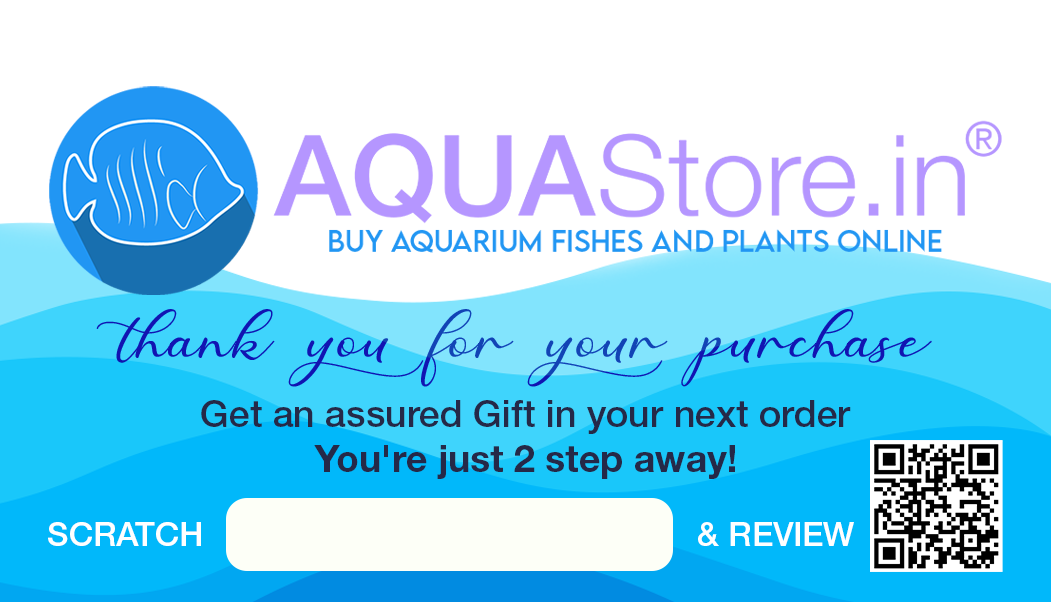
<style>
.page{position:relative;width:1051px;height:602px;background:#ffffff}
.page>*{position:absolute;margin:0}
.t1{font:62.5px "ThankYouRegular";color:#1214b2}
.t2{font:37.5px "HelveticaNeueLTStd-Md";color:#252948}
.t3{font:37.5px "HelveticaNeueLTStd-Bd";color:#252948}
.t4{font:33.3px "HelveticaNeueLTStd-Md";color:#ffffff}
</style>
<div class="page">
<p class="t1" style="left:96px;top:309px;width:836px;height:78px">thank you for your purchase</p>
<p class="t1" style="left:96px;top:309px;width:836px;height:78px">thank you for your purchase</p>
<p class="t2" style="left:201px;top:400px;width:650px;height:34px">Get an assured Gift in your next order</p>
<p class="t3" style="left:314px;top:445px;width:421px;height:34px">You're just 2 step away!</p>
<p class="t4" style="left:48px;top:522px;width:153px;height:24px">SCRATCH</p>
<p class="t4" style="left:698px;top:522px;width:156px;height:24px">&amp; REVIEW</p>
</div>
